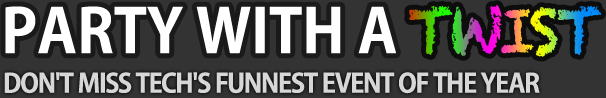
<style>
.page{position:relative;width:606px;height:98px;background:#333333}
.page>*{position:absolute;margin:0}
.t1{font:60px "AdobeGothicStd-Bold";color:#ffffff;text-transform:uppercase}
.t2{font:26px "AdobeGothicStd-Bold";letter-spacing:-0.04em;color:#d7d7d7;text-transform:uppercase}
</style>
<div class="page">
<p class="t1" style="left:5px;top:6px;width:391px;height:48px">Party with a</p>
<p class="t2" style="left:4px;top:72px;width:536px;height:22px">Don't miss Tech's funnest event OF THE YEAR</p>
</div>
